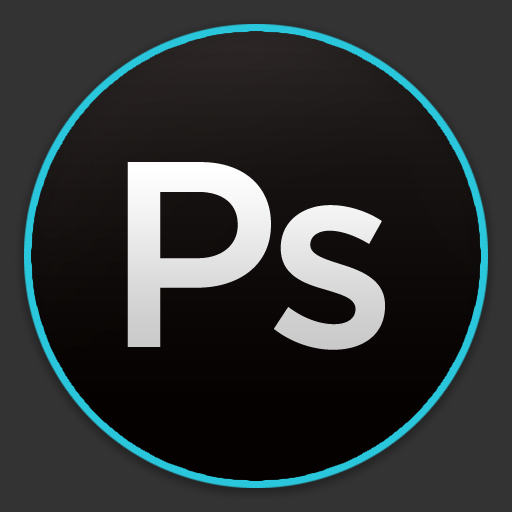
<style>
.page{position:relative;width:512px;height:512px;background:#333333}
.page>*{position:absolute;margin:0}
.t1{font:264px "Gotham-Medium";letter-spacing:-0.04em}
</style>
<div class="page">
<p class="t1" style="left:127px;top:162px;width:258px;height:188px">Ps</p>
</div>
